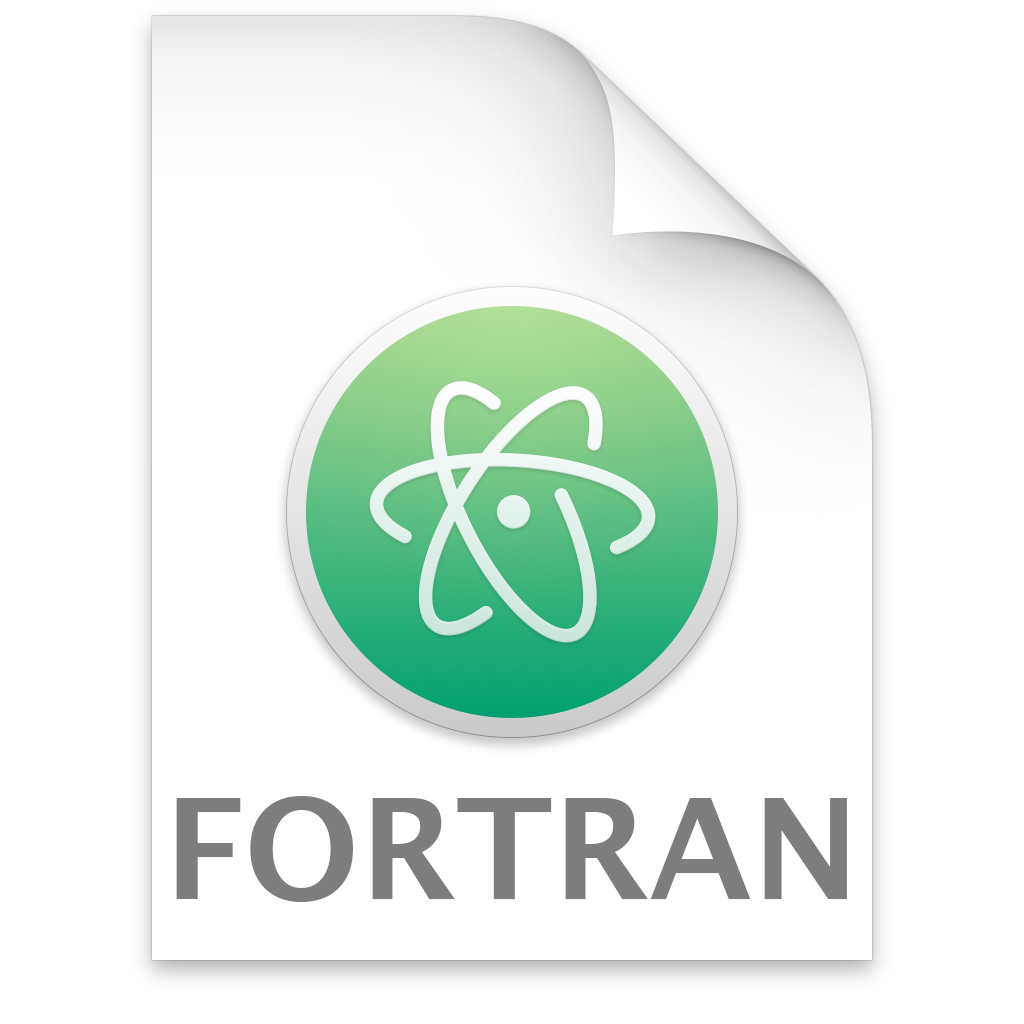
<style>
.page{position:relative;width:1024px;height:1024px;background:#ffffff}
.page>*{position:absolute;margin:0}
.t1{font:140px "LucidaGrande-Bold";color:#7d7d7d}
</style>
<div class="page">
<p class="t1" style="left:176px;top:796px;width:671px;height:106px">FORTRAN</p>
</div>
